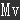
<style>
.page{position:relative;width:20px;height:20px;background:#333333}
.page>*{position:absolute;margin:0}
.t1{font:20px "LiSu";color:#ffffff;font-variant:small-caps}
</style>
<div class="page">
<p class="t1" style="left:1px;top:3px;width:18px;height:13px">Mv</p>
</div>
